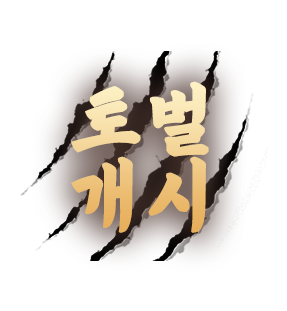
<style>
.page{position:relative;width:287px;height:311px;background:#ffffff}
.page>*{position:absolute;margin:0}
.t1{font:80.6px/75px "Dokrip";letter-spacing:0.04em;font-weight:bold;scale:0.96 1}
</style>
<div class="page">
<p class="t1" style="left:71px;top:81px;width:138px;height:152px;text-align:center">토벌<br>개시</p>
</div>
